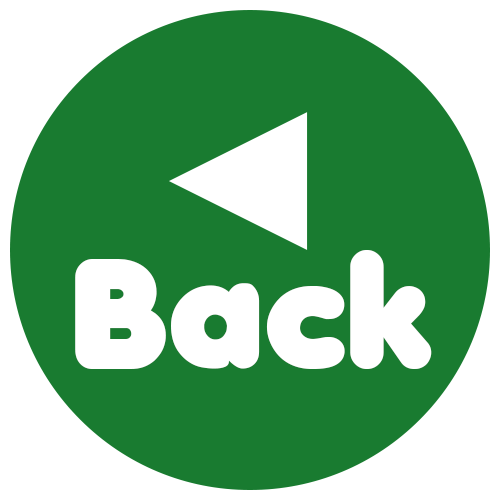
<style>
.page{position:relative;width:500px;height:500px;background:#197b30}
.page>*{position:absolute;margin:0}
.t1{font:150px "Valken";color:#ffffff}
.t2{font:150px "ArialMT";color:#ffffff}
</style>
<div class="page">
<p class="t1" style="left:75px;top:250px;width:357px;height:119px"><span class="t2"><br></span>Back</p>
</div>
